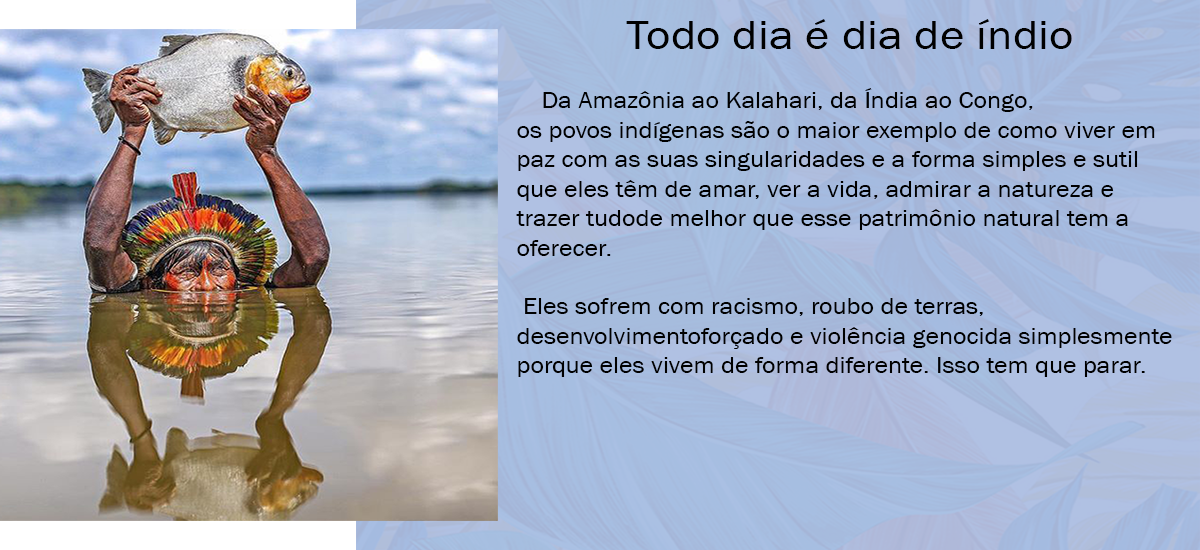
<style>
.page{position:relative;width:1200px;height:550px}
.page>*{position:absolute;margin:0}
.t1{font:22.9px/29.5px "FranklinGothic-Book";color:#000000;scale:1.13 1}
.t2{font:29.5px/29.5px "FranklinGothic-Book";color:#000000;scale:1.13 1}
.t3{font:41.7px/29.5px "FranklinGothic-Book";color:#000000;scale:1.13 1}
</style>
<div class="page">
<p class="t1" style="left:516px;top:19px;width:656px;height:358px;text-align:center"><span class="t2"><br></span><span class="t3">Todo dia é dia de índio<br><br>   </span>Da Amazônia ao Kalahari, da Índia ao Congo, <br>os povos indígenas são o maior exemplo de como viver em paz com as suas singularidades e a forma simples e sutil que eles têm de amar, ver a vida, admirar a natureza e trazer tudode melhor que esse patrimônio natural tem a oferecer.<br><br> Eles sofrem com racismo, roubo de terras, desenvolvimentoforçado e violência genocida simplesmente porque eles vivem de forma diferente. Isso tem que parar.</p>
</div>
